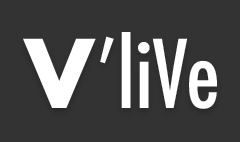
<style>
.page{position:relative;width:240px;height:142px;background:#333333}
.page>*{position:absolute;margin:0}
.t1{font:91.7px "Futura-CondensedMedium";color:#ffffff}
.t2{font:91.7px "Futura-Bold";color:#ffffff}
</style>
<div class="page">
<p class="t1" style="left:23px;top:32px;width:194px;height:77px"><span class="t2">V</span>’liVe</p>
</div>
